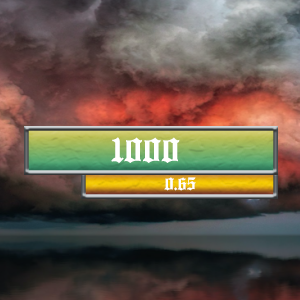
<style>
.page{position:relative;width:300px;height:300px}
.page>*{position:absolute;margin:0}
.t1{font:41.7px "Ancient-Medium";color:#ffffff}
.t2{font:21.4px "Ancient-Medium";color:#ffffff}
</style>
<div class="page">
<p class="t1" style="left:111px;top:137px;width:69px;height:27px">1000</p>
<p class="t2" style="left:164px;top:177px;width:32px;height:14px">0.65</p>
</div>
